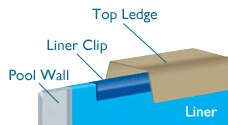
<style>
.page{position:relative;width:228px;height:125px;background:#ffffff}
.page>*{position:absolute;margin:0}
.t1{font:15px "GillSansMT";letter-spacing:0.005em;color:#016a99}
.t2{font:15px "GillSansMT";letter-spacing:0.005em;color:#ffffff}
</style>
<div class="page">
<p class="t1" style="left:92px;top:8px;width:65px;height:15px">Top Ledge</p>
<p class="t1" style="left:47px;top:39px;width:60px;height:15px">Liner Clip</p>
<p class="t1" style="left:9px;top:69px;width:60px;height:12px">Pool Wall</p>
<p class="t2" style="left:186px;top:106px;width:31px;height:11px">Liner</p>
</div>
